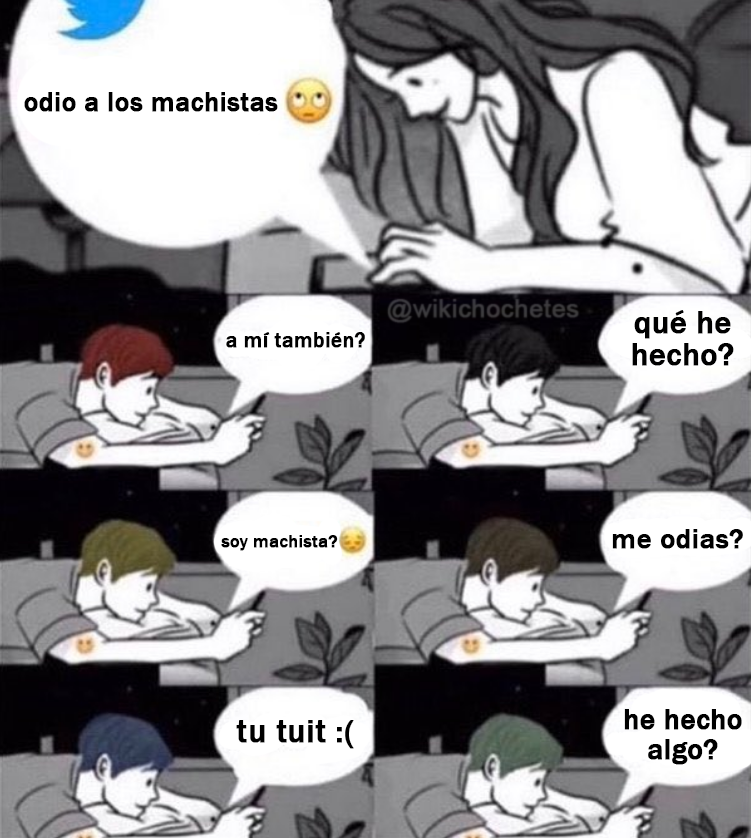
<style>
.page{position:relative;width:751px;height:838px}
.page>*{position:absolute;margin:0}
.t1{font:27.3px "FranklinGothic-Medium";color:#000000;font-weight:bold}
.t2{font:31.8px "FranklinGothic-Medium";color:#000000;font-weight:bold}
.t3{font:21.3px "FranklinGothic-Medium";color:#000000;font-weight:bold}
.t4{font:28.4px "FranklinGothic-Medium";color:#000000;font-weight:bold}
.t5{font:18px "FranklinGothic-Medium";color:#000000;font-weight:bold}
.t6{font:28.9px "FranklinGothic-Medium";color:#000000;font-weight:bold}
.t7{font:33px "FranklinGothic-Medium";color:#000000;font-weight:bold}
</style>
<div class="page">
<p class="t1" style="left:24px;top:92px;width:254px;height:20px">odio a los machistas</p>
<p class="t2" style="left:632px;top:310px;width:102px;height:56px;text-align:center">qué he<br>hecho?</p>
<p class="t3" style="left:226px;top:332px;width:139px;height:16px">a mí también?</p>
<p class="t4" style="left:612px;top:529px;width:131px;height:20px">me odias?</p>
<p class="t5" style="left:221px;top:535px;width:117px;height:16px">soy machista?</p>
<p class="t6" style="left:624px;top:709px;width:118px;height:56px;text-align:center">he hecho<br>algo?</p>
<p class="t7" style="left:236px;top:720px;width:118px;height:29px">tu tuit :(</p>
</div>
